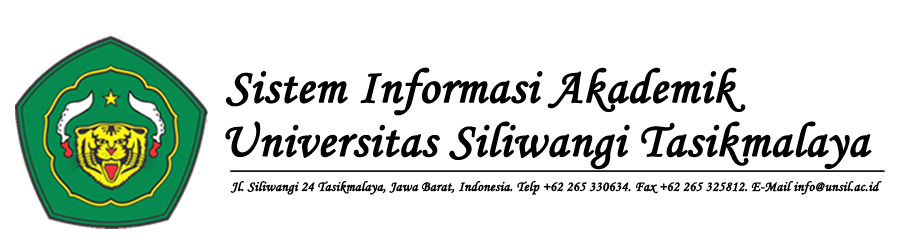
<style>
.page{position:relative;width:900px;height:250px;background:#ffffff}
.page>*{position:absolute;margin:0}
.t1{font:48.8px "MonotypeCorsiva";color:#000000;font-weight:bold}
.t2{font:13.8px "MonotypeCorsiva";color:#000000;font-weight:bold}
</style>
<div class="page">
<p class="t1" style="left:226px;top:67px;width:520px;height:49px">Sistem Informasi Akademik</p>
<p class="t1" style="left:225px;top:121px;width:647px;height:49px">Universitas Siliwangi Tasikmalaya</p>
<p class="t2" style="left:230px;top:181px;width:652px;height:14px">Jl. Siliwangi 24 Tasikmalaya, Jawa Barat, Indonesia. Telp +62 265 330634. Fax +62 265 325812. E-Mail info@unsil.ac.id</p>
</div>
